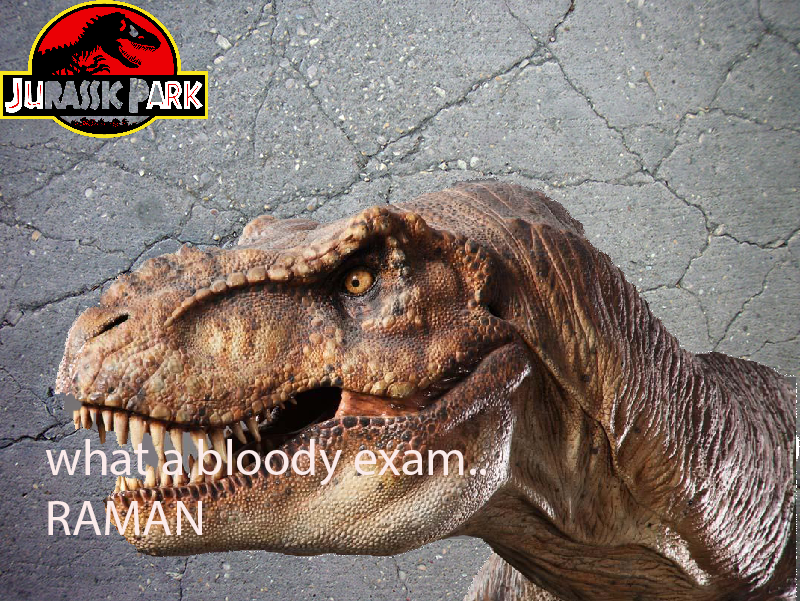
<style>
.page{position:relative;width:800px;height:601px}
.page>*{position:absolute;margin:0}
.t1{font:12px "MyriadPro-Regular";color:#fbebea}
</style>
<div class="page">
<p class="t1" style="left:45px;top:439px;width:441px;height:96px">what a bloody exam..<br>RAMAN</p>
</div>
